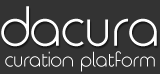
<style>
.page{position:relative;width:160px;height:74px;background:#333333}
.page>*{position:absolute;margin:0}
.t1{font:52.4px "TimeBurner";color:#ffffff}
.t2{font:19.7px "TimeBurner";color:#ffffff}
</style>
<div class="page">
<p class="t1" style="left:1px;top:6px;width:156px;height:41px">dacura</p>
<p class="t2" style="left:5px;top:51px;width:150px;height:21px">curation platform</p>
</div>
